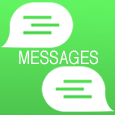
<style>
.page{position:relative;width:115px;height:115px;background:#ffffff}
.page>*{position:absolute;margin:0}
.t1{font:18px "Helvetica";color:#ffffff;scale:0.8 1}
</style>
<div class="page">
<p class="t1" style="left:19px;top:50px;width:79px;height:15px">MESSAGES</p>
</div>
